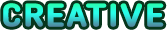
<style>
.page{position:relative;width:167px;height:30px;background:#06351c}
.page>*{position:absolute;margin:0}
.t1{font:30px "Cafe24SsurroundOTF";letter-spacing:0.05em;font-weight:bold}
</style>
<div class="page">
<p class="t1" style="left:3px;top:3px;width:161px;height:24px">CREATIVE</p>
</div>
